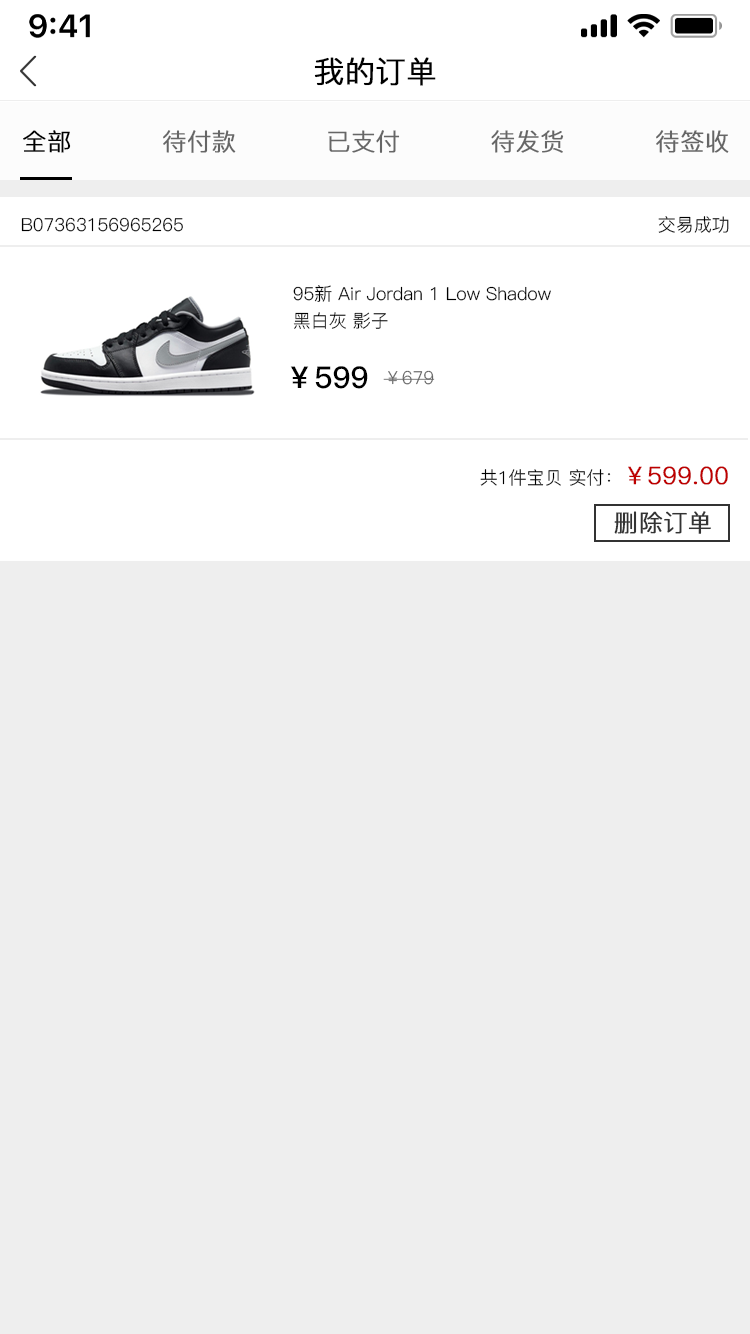
<style>
.page{position:relative;width:750px;height:1334px;background:#eeeeee}
.page>*{position:absolute;margin:0}
.t1{font:30px "PingFang-SC-Regular";color:#000000;font-weight:bold}
.t2{font:24px "PingFang-SC-Regular";color:#000000;font-weight:bold}
.t3{font:24px "PingFang-SC-Regular";color:#666666;font-weight:bold}
.t4{font:18px "PingFang-SC-Regular";color:#000000}
.t5{font:18px/27px "PingFang-SC-Regular";color:#000000}
.t6{font:30px "PingFang-SC-Bold";color:#000000}
.t7{font:18px "PingFang-SC-Regular";color:#666666}
.t8{font:24px "PingFang-SC-Regular";color:#be0000;font-weight:bold}
.t9{font:24px "PingFang-SC-Regular";color:#333333;font-weight:bold}
</style>
<div class="page">
<p class="t1" style="left:314px;top:57px;width:122px;height:29px">我的订单</p>
<p class="t2" style="left:23px;top:130px;width:48px;height:23px">全部</p>
<p class="t3" style="left:163px;top:130px;width:73px;height:23px">待付款</p>
<p class="t3" style="left:328px;top:130px;width:72px;height:23px">已支付</p>
<p class="t3" style="left:491px;top:130px;width:73px;height:23px">待发货</p>
<p class="t3" style="left:656px;top:130px;width:73px;height:23px">待签收</p>
<p class="t4" style="left:21px;top:217px;width:162px;height:15px">B07363156965265</p>
<p class="t4" style="left:658px;top:216px;width:71px;height:17px">交易成功</p>
<p class="t5" style="left:293px;top:285px;width:258px;height:44px">95新 Air Jordan 1 Low Shadow<br>黑白灰 影子</p>
<p class="t6" style="left:290px;top:366px;width:78px;height:23px">￥599</p>
<p class="t7" style="left:383px;top:370px;width:52px;height:15px">￥679</p>
<p class="t4" style="left:480px;top:466px;width:248px;height:20px">共1件宝贝 实付：<span class="t8">￥599.00</span></p>
<p class="t9" style="left:614px;top:511px;width:97px;height:23px">删除订单</p>
</div>
